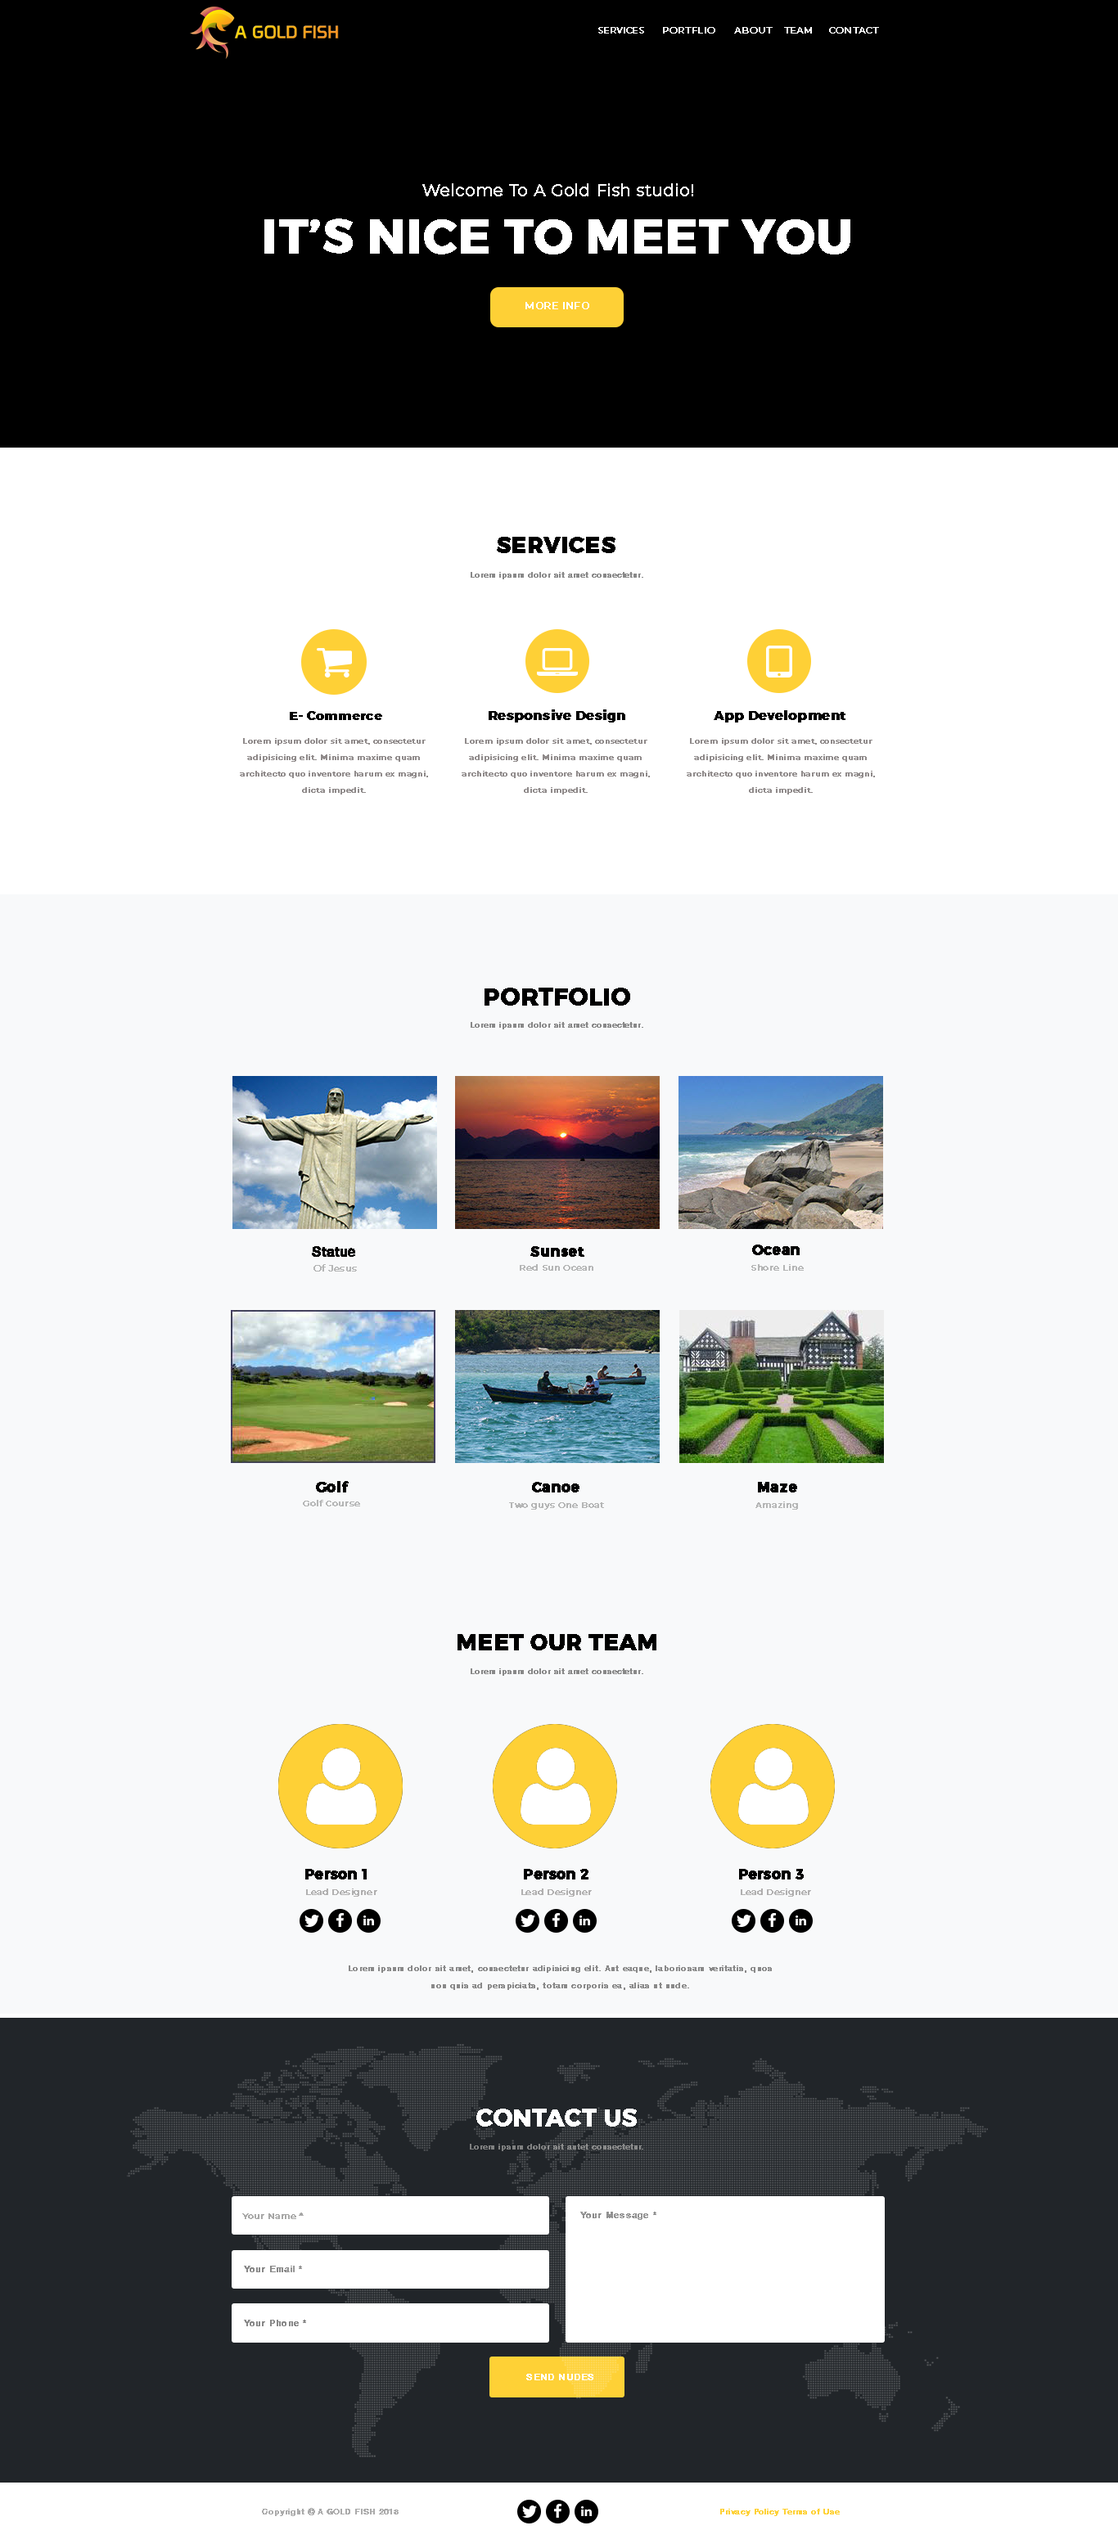
<style>
.page{position:relative;width:1118px;height:2539px;background:#f8f9fa}
.page>*{position:absolute;margin:0}
.t1{font:8.8px "Montserrat-Regular";color:#ffffff;font-weight:bold;scale:0.95 1}
.t2{font:9px "Montserrat-Regular";color:#ffffff;font-weight:bold}
.t3{font:16.4px "Montserrat-Regular";color:#ffffff;font-weight:bold}
.t4{font:48.3px "Montserrat-Bold";color:#ffffff;font-weight:bold}
.t5{font:9.8px "Montserrat-Regular";color:#ffffff;font-weight:bold}
.t6{font:22.1px "Montserrat-Bold";color:#000000;font-weight:bold}
.t7{font:8.2px "HelveticaMedium";color:#898989;font-weight:bold}
.t8{font:12.3px "Montserrat-Bold";color:#000000;font-weight:bold}
.t9{font:13.1px "Montserrat-Bold";color:#000000;font-weight:bold}
.t10{font:7.4px/16.4px "Montserrat-Regular";color:#908b8b;font-weight:bold}
.t11{font:23.7px "Montserrat-Bold";color:#000000;font-weight:bold}
.t12{font:13.9px "HelveticaMedium";color:#020202;font-weight:bold}
.t13{font:13.9px "Montserrat-Bold";color:#020202;font-weight:bold}
.t14{font:9px "Montserrat-Regular";color:#b5b6b6;font-weight:bold}
.t15{font:8.2px "Montserrat-Regular";color:#b5b6b6;font-weight:bold}
.t16{font:13.9px "Montserrat-SemiBold";color:#000000;font-weight:bold}
.t17{font:14px "Montserrat-SemiBold";color:#000000;font-weight:bold}
.t18{font:8.2px "Montserrat-Regular";color:#b1b0b0;font-weight:bold}
.t19{font:8.4px/17.2px "HelveticaMedium";letter-spacing:0.02em;color:#898989;font-weight:bold}
.t20{font:23.7px "Montserrat-Bold";letter-spacing:0.001em;color:#ffffff;font-weight:bold}
.t21{font:8.2px "HelveticaMedium";letter-spacing:0.001em;color:#7f8080;font-weight:bold}
.t22{font:8.2px "Montserrat-Regular";letter-spacing:0.001em;color:#a0a09f;font-weight:bold}
.t23{font:9px "HelveticaMedium";letter-spacing:0.02em;color:#898989;font-weight:bold}
.t24{font:9px "HelveticaMedium";letter-spacing:0.02em;color:#ffffff;font-weight:bold}
.t25{font:8.2px "HelveticaMedium";letter-spacing:0.001em;color:#ababab;font-weight:bold}
.t26{font:8.2px "HelveticaMedium";letter-spacing:0.001em;color:#fed136;font-weight:bold}
</style>
<div class="page">
<p class="t1" style="left:598px;top:27px;width:46px;height:7px">SERVICES</p>
<p class="t2" style="left:663px;top:27px;width:52px;height:7px">PORTFLIO</p>
<p class="t2" style="left:734px;top:27px;width:38px;height:7px">ABOUT</p>
<p class="t2" style="left:784px;top:27px;width:28px;height:7px">TEAM</p>
<p class="t2" style="left:829px;top:27px;width:50px;height:7px">CONTACT</p>
<p class="t3" style="left:422px;top:183px;width:271px;height:13px">Welcome To A Gold Fish studio!</p>
<p class="t4" style="left:264px;top:218px;width:586px;height:36px">IT’S NICE TO MEET YOU</p>
<p class="t5" style="left:525px;top:302px;width:64px;height:7px">MORE INFO</p>
<p class="t6" style="left:497px;top:537px;width:118px;height:16px">SERVICES</p>
<p class="t7" style="left:470px;top:572px;width:173px;height:7px">Lorem ipsum dolor sit amet consectetur.</p>
<p class="t8" style="left:290px;top:711px;width:92px;height:9px">E- Commerce</p>
<p class="t9" style="left:488px;top:709px;width:137px;height:13px">Responsive Design</p>
<p class="t9" style="left:713px;top:710px;width:132px;height:12px">App Development</p>
<p class="t10" style="left:240px;top:738px;width:188px;height:56px;text-align:center">Lorem ipsum dolor sit amet, consectetur<br>adipisicing elit. Minima maxime quam<br>architecto quo inventore harum ex magni,<br>dicta impedit.</p>
<p class="t10" style="left:461px;top:738px;width:189px;height:56px;text-align:center">Lorem ipsum dolor sit amet, consectetur<br>adipisicing elit. Minima maxime quam<br>architecto quo inventore harum ex magni,<br>dicta impedit.</p>
<p class="t10" style="left:686px;top:738px;width:189px;height:56px;text-align:center">Lorem ipsum dolor sit amet, consectetur<br>adipisicing elit. Minima maxime quam<br>architecto quo inventore harum ex magni,<br>dicta impedit.</p>
<p class="t11" style="left:484px;top:988px;width:146px;height:18px">PORTFOLIO</p>
<p class="t7" style="left:470px;top:1022px;width:173px;height:7px">Lorem ipsum dolor sit amet consectetur.</p>
<p class="t12" style="left:312px;top:1246px;width:43px;height:11px">Statue</p>
<p class="t13" style="left:530px;top:1246px;width:54px;height:11px">Sunset</p>
<p class="t13" style="left:752px;top:1244px;width:47px;height:11px">Ocean</p>
<p class="t14" style="left:313px;top:1264px;width:44px;height:7px">Of Jesus</p>
<p class="t15" style="left:520px;top:1264px;width:73px;height:7px">Red Sun Ocean</p>
<p class="t15" style="left:751px;top:1264px;width:52px;height:7px">Shore Line</p>
<p class="t13" style="left:316px;top:1481px;width:33px;height:11px">Golf</p>
<p class="t13" style="left:532px;top:1482px;width:47px;height:10px">Canoe</p>
<p class="t13" style="left:758px;top:1482px;width:39px;height:10px">Maze</p>
<p class="t15" style="left:303px;top:1500px;width:57px;height:6px">Golf Course</p>
<p class="t15" style="left:509px;top:1502px;width:95px;height:8px">Two guys One Boat</p>
<p class="t15" style="left:755px;top:1501px;width:43px;height:9px">Amazing</p>
<p class="t6" style="left:457px;top:1634px;width:199px;height:16px">MEET OUR TEAM</p>
<p class="t7" style="left:470px;top:1668px;width:173px;height:8px">Lorem ipsum dolor sit amet consectetur.</p>
<p class="t16" style="left:305px;top:1869px;width:62px;height:10px">Person 1</p>
<p class="t17" style="left:524px;top:1869px;width:64px;height:10px">Person 2</p>
<p class="t17" style="left:739px;top:1869px;width:64px;height:10px">Person 3</p>
<p class="t18" style="left:306px;top:1888px;width:71px;height:9px">Lead Designer</p>
<p class="t18" style="left:521px;top:1888px;width:71px;height:9px">Lead Designer</p>
<p class="t18" style="left:740px;top:1888px;width:71px;height:9px">Lead Designer</p>
<p class="t19" style="left:349px;top:1965px;width:423px;height:25px;text-align:center">Lorem ipsum dolor sit amet, consectetur adipisicing elit. Aut eaque, laboriosam veritatis, quos<br>non quis ad perspiciats, totam corporis ea, alias ut unde.</p>
<p class="t20" style="left:476px;top:2108px;width:161px;height:18px">CONTACT US</p>
<p class="t21" style="left:470px;top:2144px;width:173px;height:7px">Lorem ipsum dolor sit antet consectetur.</p>
<p class="t22" style="left:242px;top:2212px;width:62px;height:7px">Your Name *</p>
<p class="t23" style="left:580px;top:2212px;width:76px;height:8px">Your Message *</p>
<p class="t23" style="left:244px;top:2266px;width:58px;height:6px">Your Email *</p>
<p class="t23" style="left:244px;top:2320px;width:62px;height:6px">Your Phone *</p>
<p class="t24" style="left:526px;top:2374px;width:67px;height:6px">SEND NUDES</p>
<p class="t25" style="left:262px;top:2508px;width:136px;height:8px">Copyright © A GOLD FISH 2018</p>
<p class="t26" style="left:720px;top:2509px;width:119px;height:7px">Privacy Policy Terms of Use</p>
</div>
